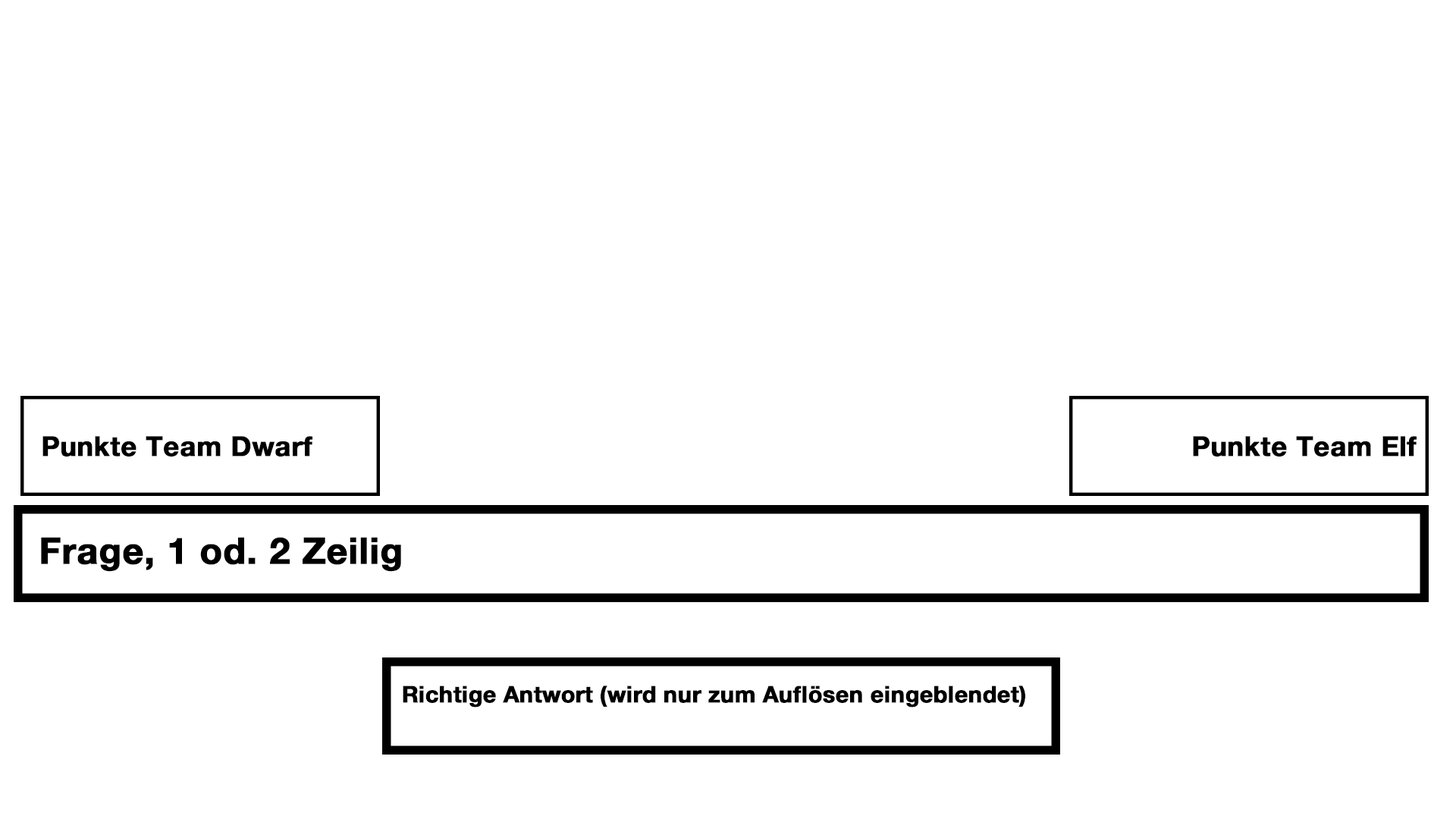
<style>
.page{position:relative;width:1456px;height:819px;background:#ffffff}
.page>*{position:absolute;margin:0}
.t1{font:27.3px "HelveticaNeueBold";color:#000000;font-weight:bold}
.t2{font:36.4px "HelveticaNeueBold";color:#000000;font-weight:bold}
.t3{font:22.7px "HelveticaNeueBold";color:#000000;font-weight:bold}
</style>
<div class="page">
<p class="t1" style="left:42px;top:436px;width:270px;height:21px">Punkte Team Dwarf</p>
<p class="t1" style="left:1193px;top:436px;width:224px;height:21px">Punkte Team Elf</p>
<p class="t2" style="left:41px;top:537px;width:360px;height:35px">Frage, 1 od. 2 Zeilig</p>
<p class="t3" style="left:403px;top:686px;width:622px;height:22px">Richtige Antwort (wird nur zum Auflösen eingeblendet)</p>
</div>
